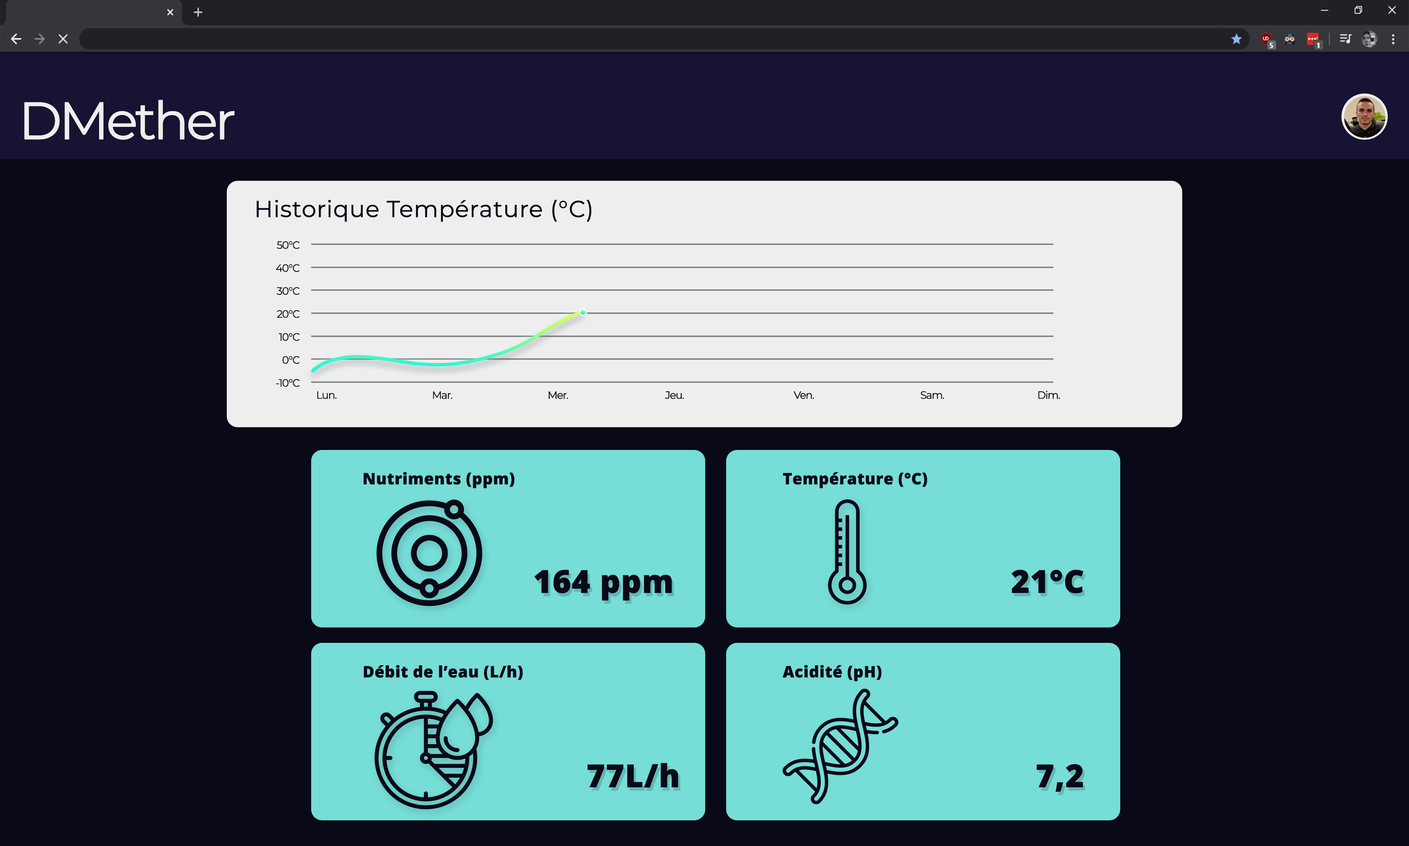
<style>
.page{position:relative;width:1409px;height:846px;background:#0a0917}
.page>*{position:absolute;margin:0}
.t1{font:52.3px "Montserrat-Regular";letter-spacing:-0.08em;color:#eeeeee;font-weight:bold}
.t2{font:23px "Montserrat-Regular";color:#0a0917;font-weight:bold}
.t3{font:10.5px "Montserrat-Regular";letter-spacing:-0.08em;color:#0a0917;font-weight:bold}
.t4{font:15.7px "OpenSans-Extrabold";color:#0a0917;font-weight:bold}
.t5{font:31.4px "OpenSans-Extrabold";color:#0a0917;font-weight:bold}
</style>
<div class="page">
<p class="t1" style="left:24px;top:100px;width:210px;height:40px">DMether</p>
<p class="t2" style="left:256px;top:200px;width:335px;height:22px">Historique Température (°C)</p>
<p class="t3" style="left:277px;top:241px;width:23px;height:8px">50°C</p>
<p class="t3" style="left:276px;top:264px;width:24px;height:8px">40°C</p>
<p class="t3" style="left:277px;top:287px;width:23px;height:8px">30°C</p>
<p class="t3" style="left:277px;top:310px;width:23px;height:8px">20°C</p>
<p class="t3" style="left:279px;top:333px;width:21px;height:8px">10°C</p>
<p class="t3" style="left:282px;top:356px;width:18px;height:8px">0°C</p>
<p class="t3" style="left:276px;top:379px;width:24px;height:8px">-10°C</p>
<p class="t3" style="left:317px;top:391px;width:19px;height:8px">Lun.</p>
<p class="t3" style="left:433px;top:391px;width:19px;height:8px">Mar.</p>
<p class="t3" style="left:548px;top:391px;width:20px;height:8px">Mer.</p>
<p class="t3" style="left:665px;top:391px;width:19px;height:8px">Jeu.</p>
<p class="t3" style="left:794px;top:391px;width:20px;height:8px">Ven.</p>
<p class="t3" style="left:921px;top:391px;width:23px;height:8px">Sam.</p>
<p class="t3" style="left:1038px;top:391px;width:22px;height:8px">Dim.</p>
<p class="t4" style="left:364px;top:472px;width:150px;height:17px">Nutriments (ppm)</p>
<p class="t4" style="left:783px;top:472px;width:144px;height:17px">Température (°C)</p>
<p class="t5" style="left:534px;top:570px;width:138px;height:31px">164 ppm</p>
<p class="t5" style="left:1011px;top:570px;width:72px;height:24px">21°C</p>
<p class="t4" style="left:364px;top:665px;width:159px;height:16px">Débit de l’eau (L/h)</p>
<p class="t4" style="left:783px;top:665px;width:99px;height:17px">Acidité (pH)</p>
<p class="t5" style="left:587px;top:763px;width:91px;height:25px">77L/h</p>
<p class="t5" style="left:1036px;top:764px;width:47px;height:28px">7,2</p>
</div>
